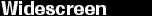
<style>
.page{position:relative;width:152px;height:16px;background:#000000}
.page>*{position:absolute;margin:0}
.t1{font:17.2px "FolkPro-Heavy";color:#ffffff}
</style>
<div class="page">
<p class="t1" style="left:1px;top:1px;width:105px;height:14px">Widescreen</p>
</div>
